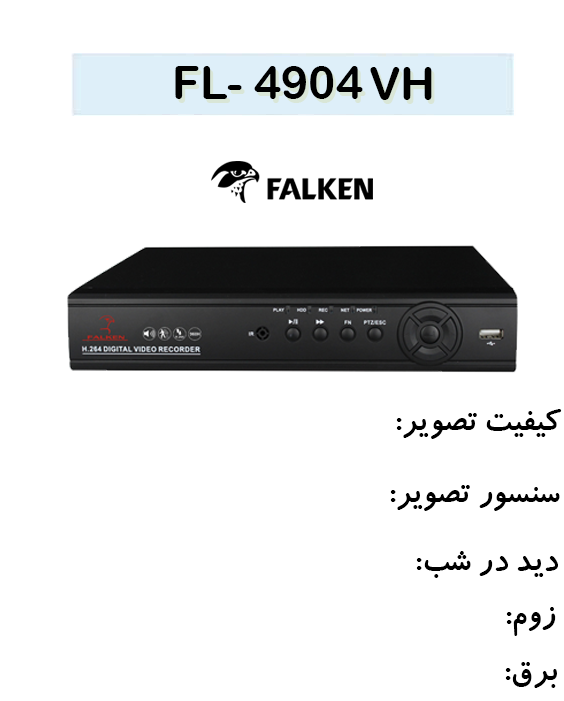
<style>
.page{position:relative;width:564px;height:701px;background:#ffffff}
.page>*{position:absolute;margin:0}
.t1{font:45.9px "ArialRoundedMTBold";color:#000000}
.t2{font:35.3px "BKoodakBold";color:#000000}
</style>
<div class="page">
<p class="t1" style="left:175px;top:66px;width:188px;height:33px">4904 -FL</p>
<p class="t1" style="left:370px;top:67px;width:62px;height:33px">VH</p>
<p class="t2" style="left:396px;top:409px;width:166px;height:30px">کیفیت تصویر:</p>
<p class="t2" style="left:390px;top:485px;width:170px;height:26px">سنسور تصویر:</p>
<p class="t2" style="left:416px;top:551px;width:142px;height:27px">دید در شب:</p>
<p class="t2" style="left:506px;top:607px;width:50px;height:29px">زوم:</p>
<p class="t2" style="left:505px;top:662px;width:52px;height:26px">برق:</p>
</div>
